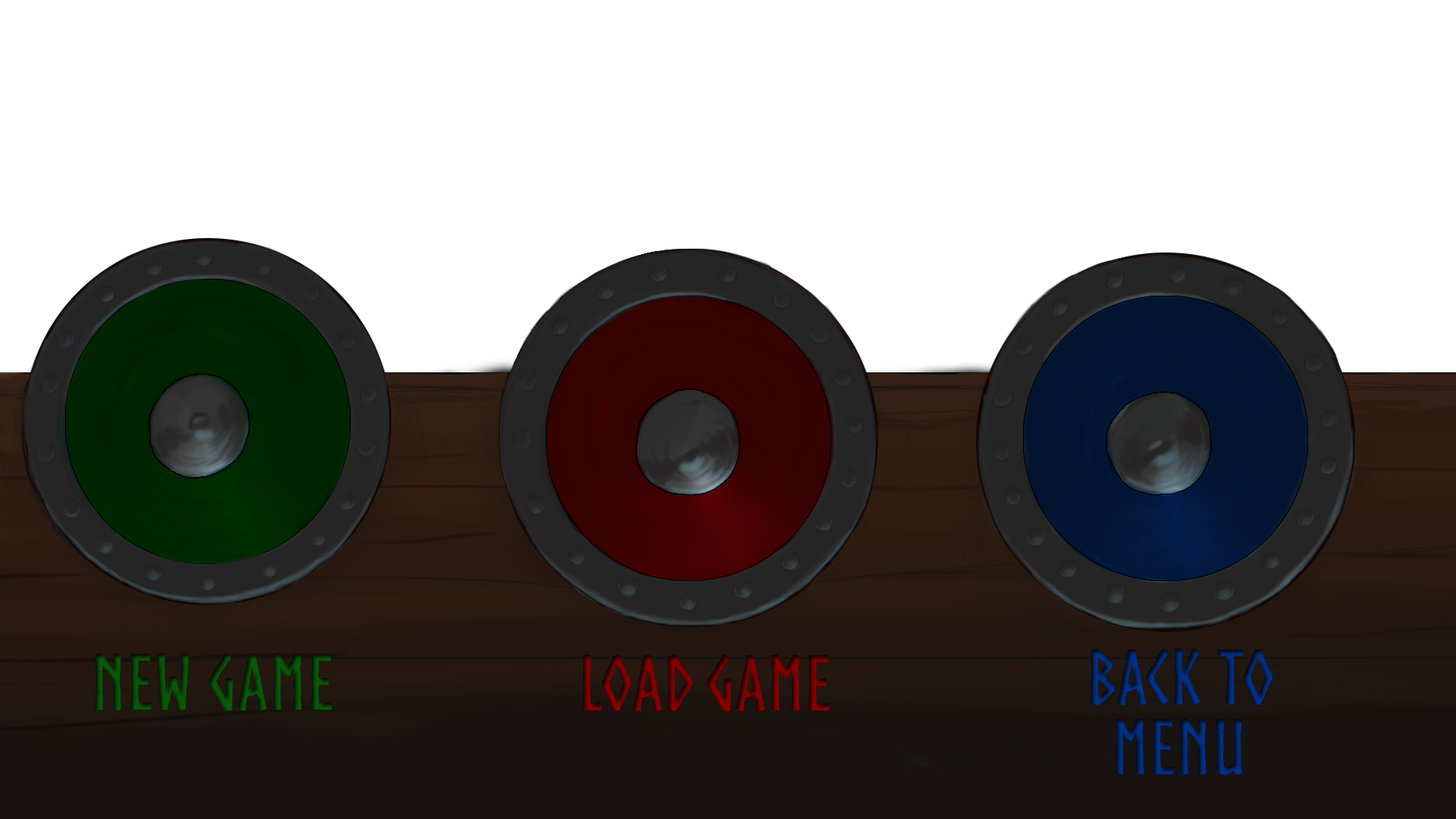
<style>
.page{position:relative;width:1456px;height:819px;background:#ffffff}
.page>*{position:absolute;margin:0}
.t1{font:76.1px "Norse-Bold";color:#074a07}
.t2{font:75.8px "Norse-Bold"}
.t3{font:75.8px/69.5px "Norse-Bold"}
</style>
<div class="page">
<p class="t1" style="left:95px;top:652px;width:237px;height:59px">NEW GAME</p>
<p class="t2" style="left:582px;top:654px;width:248px;height:58px">LOAD GAME</p>
<p class="t3" style="left:1090px;top:648px;width:182px;height:127px;text-align:center">BACK TO<br>MENU</p>
</div>
